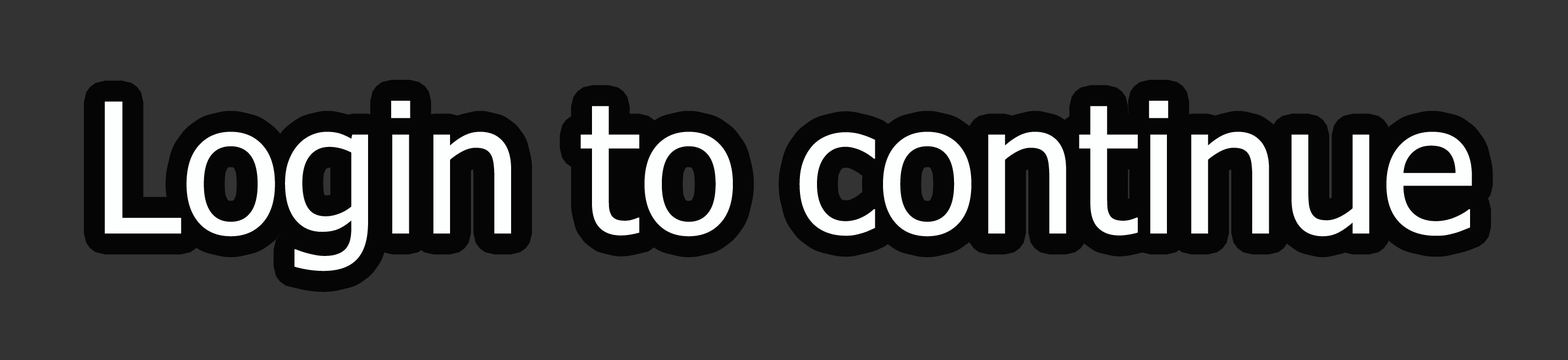
<style>
.page{position:relative;width:1568px;height:360px;background:#333333}
.page>*{position:absolute;margin:0}
.t1{font:181.1px "Tahoma";color:#fdfefe}
</style>
<div class="page">
<p class="t1" style="left:105px;top:101px;width:1367px;height:170px">Login to continue</p>
</div>
